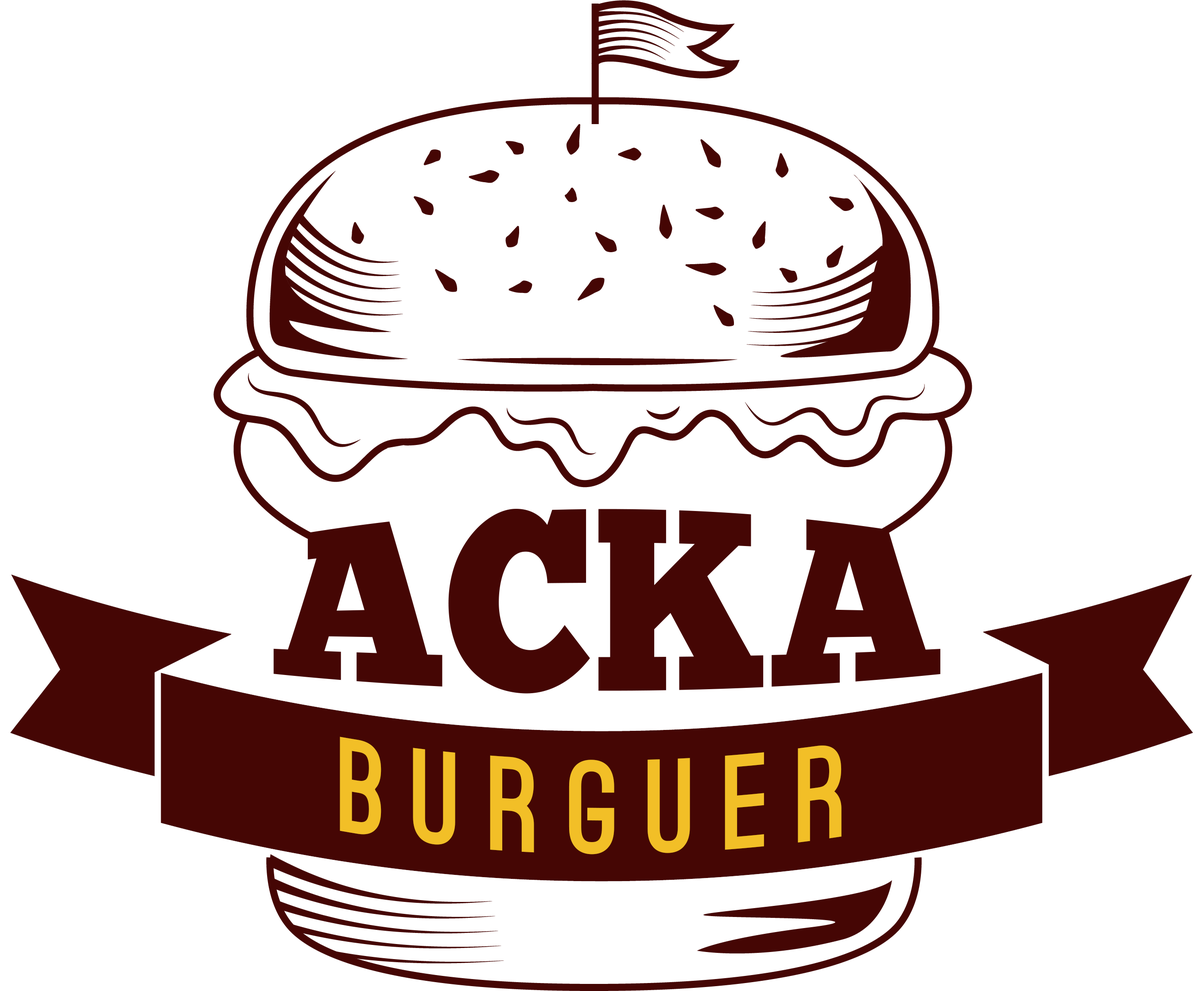
<style>
.page{position:relative;width:1203px;height:991px;background:#ffffff}
.page>*{position:absolute;margin:0}
.t1{font:192px "ChunkFive-Regular";color:#450604;scale:1.11 1}
.t2{font:127.6px "OstrichSans-Black";letter-spacing:0.2em;color:#f2bf27}
</style>
<div class="page">
<p class="t1" style="left:273px;top:509px;width:668px;height:184px">ACKA</p>
<p class="t2" style="left:340px;top:736px;width:502px;height:118px">BURGUER</p>
</div>
